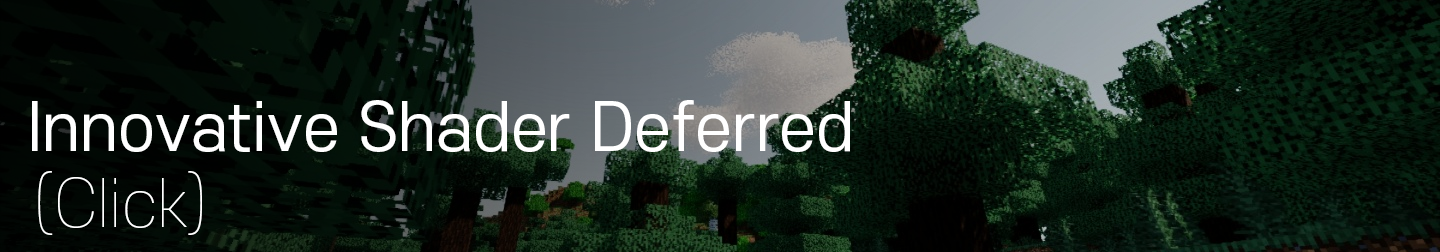
<style>
.page{position:relative;width:1440px;height:252px}
.page>*{position:absolute;margin:0}
.t1{font:64px "S-CoreDream-4Regular";color:#ffffff}
.t2{font:64px "S-CoreDream-1Thin";color:#ffffff}
</style>
<div class="page">
<p class="t1" style="left:32px;top:100px;width:818px;height:52px">Innovative Shader Deferred</p>
<p class="t2" style="left:38px;top:171px;width:164px;height:64px">(Click)</p>
</div>
